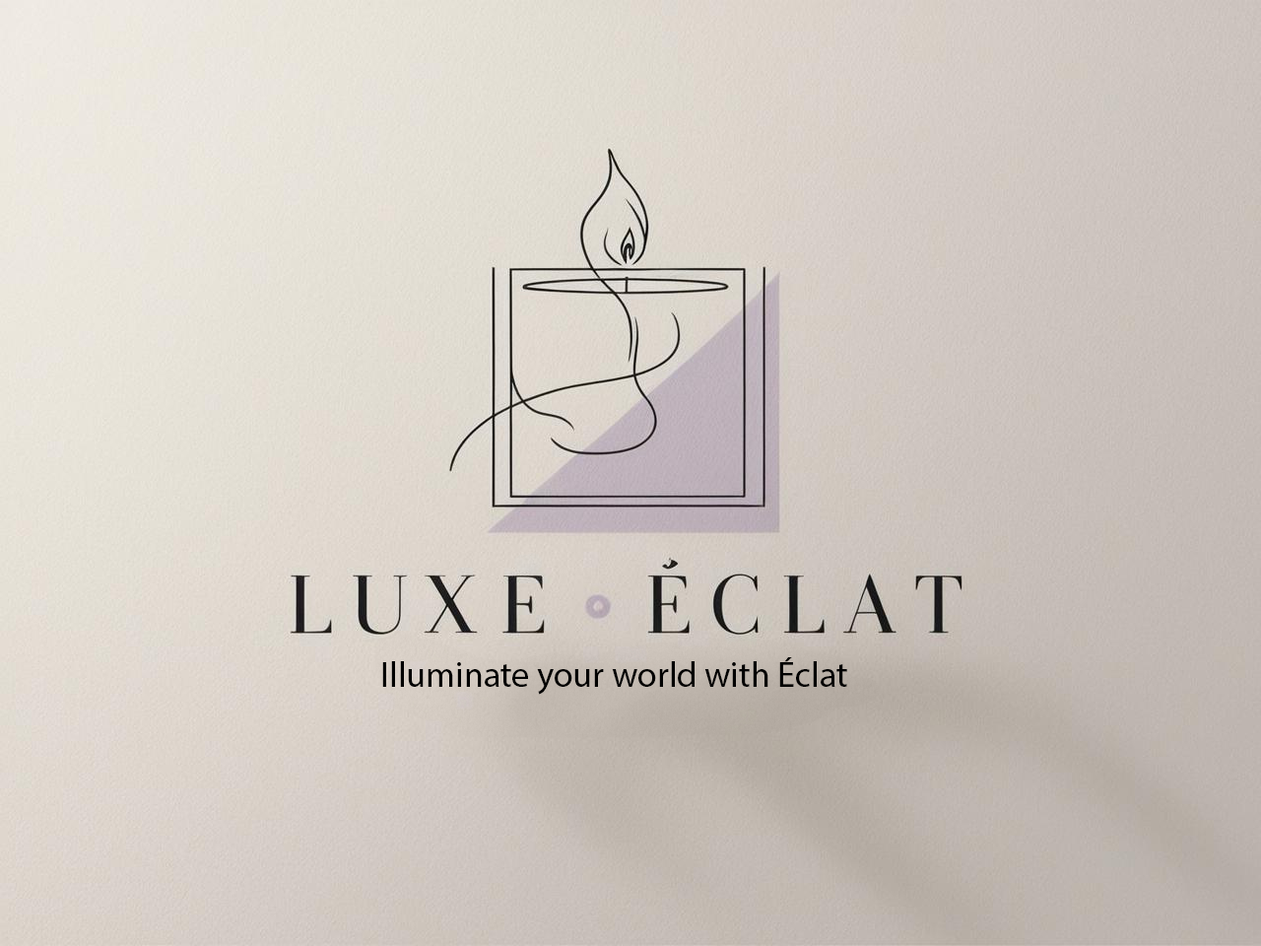
<style>
.page{position:relative;width:1261px;height:946px}
.page>*{position:absolute;margin:0}
.t1{font:35.5px "MyriadPro-Regular";color:#000000}
</style>
<div class="page">
<p class="t1" style="left:382px;top:657px;width:465px;height:37px">Illuminate your world with Éclat</p>
</div>
